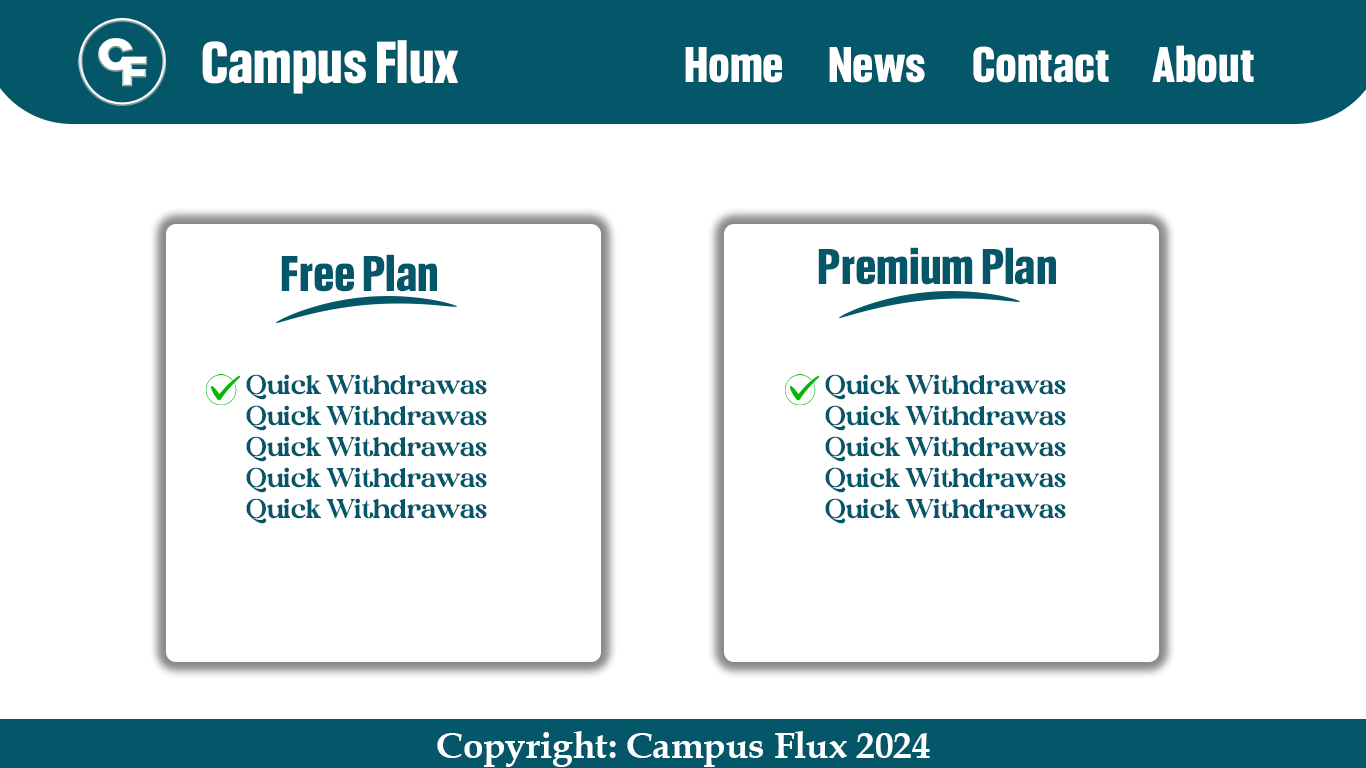
<style>
.page{position:relative;width:1366px;height:768px;background:#ffffff}
.page>*{position:absolute;margin:0}
.t1{font:56.4px "Headlines-Bold";color:#ffffff}
.t2{font:48px "Headlines-Bold";color:#ffffff}
.t3{font:48px "Headlines-Bold";color:#045769}
.t4{font:26px "Heibird";color:#045769}
.t5{font:36.7px "BookAntiqua-Bold";color:#ffffff}
</style>
<div class="page">
<p class="t1" style="left:202px;top:40px;width:256px;height:54px">Campus Flux</p>
<p class="t2" style="left:685px;top:45px;width:569px;height:38px">Home  News  Contact  About</p>
<p class="t3" style="left:281px;top:254px;width:156px;height:38px">Free Plan</p>
<p class="t3" style="left:818px;top:247px;width:238px;height:38px">Premium Plan</p>
<p class="t4" style="left:246px;top:374px;width:241px;height:150px">Quick Withdrawas<br>Quick Withdrawas<br>Quick Withdrawas<br>Quick Withdrawas<br>Quick Withdrawas</p>
<p class="t4" style="left:825px;top:374px;width:241px;height:150px">Quick Withdrawas<br>Quick Withdrawas<br>Quick Withdrawas<br>Quick Withdrawas<br>Quick Withdrawas</p>
<p class="t5" style="left:437px;top:731px;width:493px;height:36px">Copyright: Campus Flux 2024</p>
</div>
